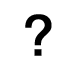
<style>
.page{position:relative;width:71px;height:71px;background:#ffffff}
.page>*{position:absolute;margin:0}
.t1{font:56px "Helvetica";color:#000000;font-weight:bold}
</style>
<div class="page">
<p class="t1" style="left:25px;top:14px;width:27px;height:42px">?</p>
</div>
